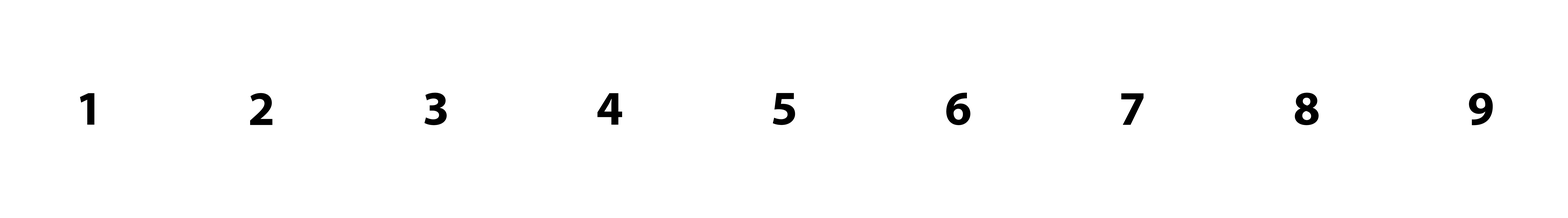
<style>
.page{position:relative;width:1568px;height:218px;background:#ffffff}
.page>*{position:absolute;margin:0}
.t1{font:48.4px "MyriadPro-Bold";color:#000000}
</style>
<div class="page">
<p class="t1" style="left:80px;top:93px;width:14px;height:32px">1</p>
<p class="t1" style="left:250px;top:93px;width:22px;height:32px">2</p>
<p class="t1" style="left:424px;top:93px;width:23px;height:32px">3</p>
<p class="t1" style="left:597px;top:93px;width:25px;height:32px">4</p>
<p class="t1" style="left:773px;top:93px;width:22px;height:32px">5</p>
<p class="t1" style="left:946px;top:92px;width:24px;height:33px">6</p>
<p class="t1" style="left:1121px;top:93px;width:23px;height:32px">7</p>
<p class="t1" style="left:1295px;top:92px;width:24px;height:33px">8</p>
<p class="t1" style="left:1469px;top:93px;width:24px;height:32px">9</p>
</div>
